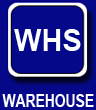
<style>
.page{position:relative;width:96px;height:110px;background:#050989}
.page>*{position:absolute;margin:0}
.t1{font:30px "Arial-BoldMT";color:#feffff}
.t2{font:18.5px "Arial-BoldMT";color:#feffff;scale:0.75 1}
</style>
<div class="page">
<p class="t1" style="left:14px;top:29px;width:67px;height:22px">WHS</p>
<p class="t2" style="left:2px;top:94px;width:92px;height:13px">WAREHOUSE</p>
</div>
